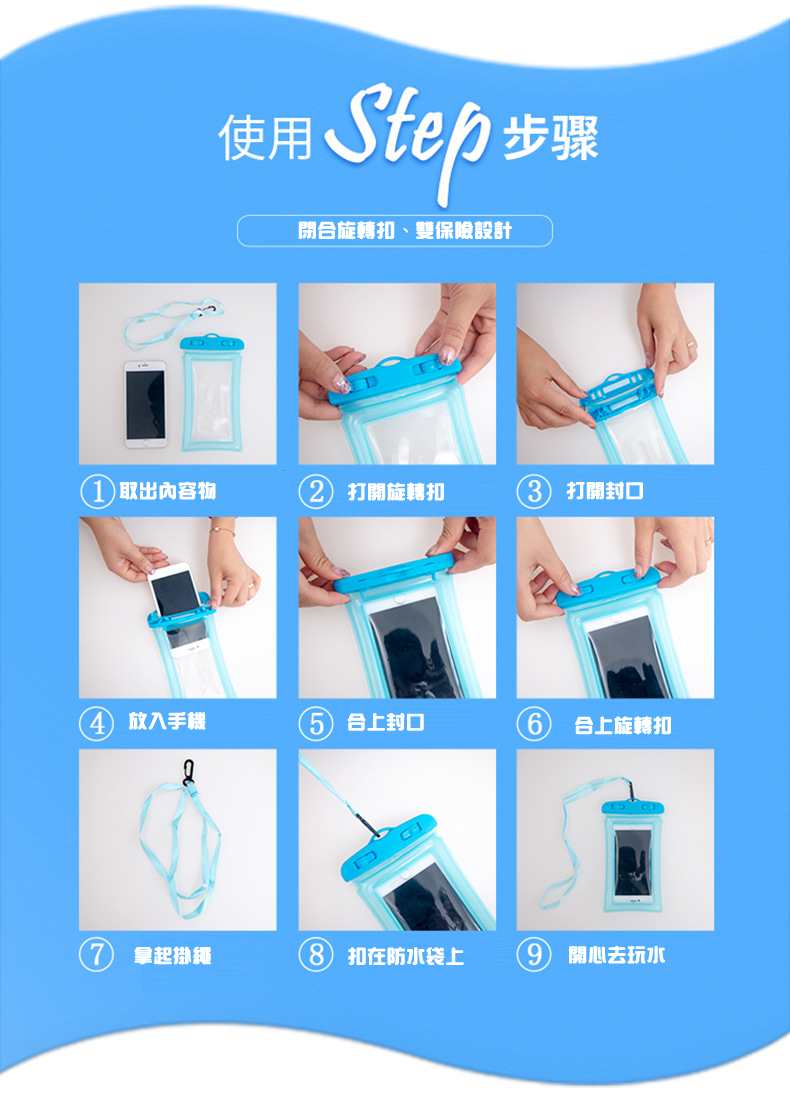
<style>
.page{position:relative;width:790px;height:1113px}
.page>*{position:absolute;margin:0}
.t1{font:18px "HanWangZonYi";letter-spacing:0.05em;color:#ffffff;font-weight:bold}
</style>
<div class="page">
<p class="t1" style="left:298px;top:221px;width:214px;height:18px">閉合旋轉扣、雙保險設計</p>
<p class="t1" style="left:119px;top:481px;width:97px;height:19px">取出內容物</p>
<p class="t1" style="left:348px;top:482px;width:96px;height:19px">打開旋轉扣</p>
<p class="t1" style="left:566px;top:481px;width:77px;height:19px">打開封口</p>
<p class="t1" style="left:129px;top:712px;width:77px;height:18px">放入手機</p>
<p class="t1" style="left:347px;top:713px;width:77px;height:18px">合上封口</p>
<p class="t1" style="left:575px;top:716px;width:96px;height:19px">合上旋轉扣</p>
<p class="t1" style="left:134px;top:946px;width:77px;height:19px">拿起掛繩</p>
<p class="t1" style="left:348px;top:947px;width:116px;height:18px">扣在防水袋上</p>
<p class="t1" style="left:569px;top:946px;width:96px;height:18px">開心去玩水</p>
</div>
